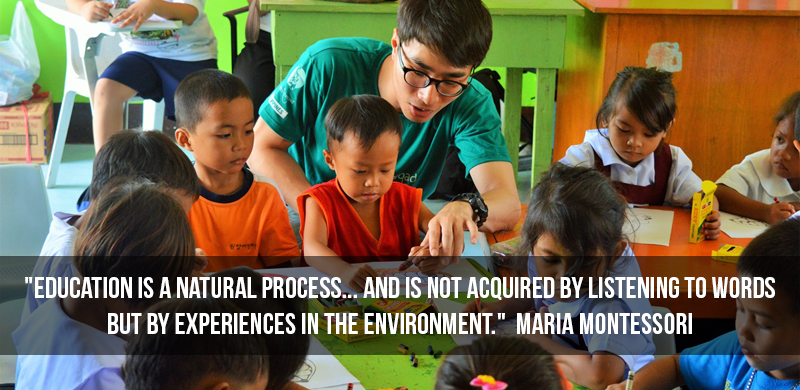
<style>
.page{position:relative;width:800px;height:390px}
.page>*{position:absolute;margin:0}
.t1{font:30px/36px "BebasNeue";color:#ffffff;text-transform:uppercase}
</style>
<div class="page">
<p class="t1" style="left:25px;top:277px;width:750px;height:57px;text-align:center">"Education is a natural process... and is not acquired by listening to words but by experiences in the environment."  Maria Montessori</p>
</div>
